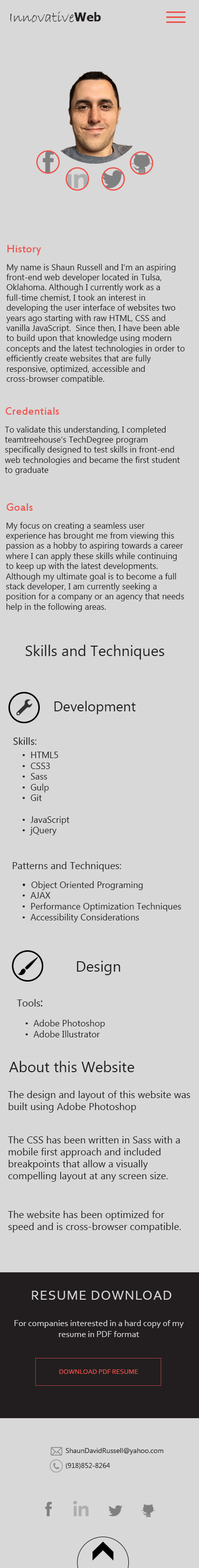
<style>
.page{position:relative;width:199px;height:1568px;background:#d8d8d8}
.page>*{position:absolute;margin:0}
.t1{font:14.9px "BradleyHandITC";color:#221e1f}
.t2{font:11.9px "Tahoma-Bold";color:#221e1f}
.t3{font:11.9px "EstrangeloEdessa";color:#ee524b}
.t4{font:8.5px "LaoUI";color:#221e1f}
.t5{font:14.9px "LaoUI";color:#221e1f}
.t6{font:13.9px "LaoUI";color:#221e1f}
.t7{font:10px "LaoUI";color:#221e1f}
.t8{font:9px "LaoUI";color:#221e1f}
.t9{font:11.9px "LaoUI";color:#221e1f}
.t10{font:13.9px "Corbel";letter-spacing:0.05em;color:#d8d8d8}
.t11{font:9px "Corbel";color:#d8d8d8}
.t12{font:7px "Corbel";color:#ee524b}
.t13{font:7px/14.9px "LaoUI";color:#221e1f}
</style>
<div class="page">
<p class="t1" style="left:10px;top:11px;width:91px;height:11px">Innovative<span class="t2">Web</span></p>
<p class="t3" style="left:7px;top:245px;width:34px;height:10px">History</p>
<p class="t4" style="left:6px;top:264px;width:179px;height:120px;text-align:right">My name is Shaun Russell and I’m an aspiring front-end web developer located in Tulsa, Oklahoma. Although I currently work as a full-time chemist, I took an interest in developing the user interface of websites two years ago starting with raw HTML, CSS and vanilla JavaScript.  Since then, I have been able to build upon that knowledge using modern concepts and the latest technologies in order to efficiently create websites that are fully responsive, optimized, accessible and cross-browser compatible.</p>
<p class="t3" style="left:5px;top:407px;width:54px;height:8px">Credentials</p>
<p class="t4" style="left:5px;top:426px;width:175px;height:49px;text-align:right">To validate this understanding, I completed teamtreehouse’s TechDegree program specifically designed to test skills in front-end web technologies and became the first student to graduate<br>.</p>
<p class="t3" style="left:6px;top:503px;width:27px;height:8px">Goals</p>
<p class="t4" style="left:6px;top:522px;width:178px;height:90px;text-align:right">My focus on creating a seamless user experience has brought me from viewing this passion as a hobby to aspiring towards a career where I can apply these skills while continuing to keep up with the latest developments. Although my ultimate goal is to become a full stack developer, I am currently seeking a position for a company or an agency that needs help in the following areas.<br><br> using the following areas of expertise.</p>
<p class="t5" style="left:25px;top:645px;width:139px;height:15px">Skills and Techniques</p>
<p class="t6" style="left:54px;top:701px;width:82px;height:13px">Development</p>
<p class="t7" style="left:13px;top:737px;width:23px;height:8px">Skills:</p>
<p class="t8" style="left:22px;top:752px;width:48px;height:83px;text-align:right">•  HTML5<br>•  CSS3<br>•  Sass<br>•  Gulp<br>•  Git<br><br>•  JavaScript<br>•  jQuery</p>
<p class="t7" style="left:12px;top:862px;width:109px;height:10px">Patterns and Techniques:</p>
<p class="t8" style="left:22px;top:881px;width:159px;height:41px;text-align:right"><span class="t7">• </span> Object Oriented Programing<br>•  AJAX<br>•  Performance Optimization Techniques<br>•  Accessibility Considerations</p>
<p class="t5" style="left:77px;top:961px;width:43px;height:14px">Design</p>
<p class="t7" style="left:17px;top:999px;width:25px;height:8px">Tools<span class="t9">:</span></p>
<p class="t8" style="left:25px;top:1019px;width:80px;height:18px;text-align:right">•  Adobe Photoshop<br>•  Adobe Illustrator</p>
<p class="t5" style="left:9px;top:1061px;width:125px;height:11px">About this Website</p>
<p class="t7" style="left:8px;top:1091px;width:182px;height:22px;text-align:right">The design and layout of this website was built using Adobe Photoshop</p>
<p class="t7" style="left:8px;top:1136px;width:172px;height:46px;text-align:right">The CSS has been written in Sass with a mobile first approach and included breakpoints that allow a visually compelling layout at any screen size.</p>
<p class="t7" style="left:8px;top:1211px;width:173px;height:21px;text-align:right">The website has been optimized for speed and is cross-browser compatible.</p>
<p class="t10" style="left:32px;top:1291px;width:140px;height:9px">RESUME DOWNLOAD</p>
<p class="t11" style="left:14px;top:1320px;width:170px;height:17px;text-align:center">For companies interested in a hard copy of my resume in PDF format</p>
<p class="t12" style="left:59px;top:1369px;width:79px;height:5px">DOWNLOAD PDF RESUME</p>
<p class="t13" style="left:66px;top:1448px;width:98px;height:21px;text-align:right">ShaunDavidRussell@yahoo.com<br>(918)852-8264</p>
</div>
